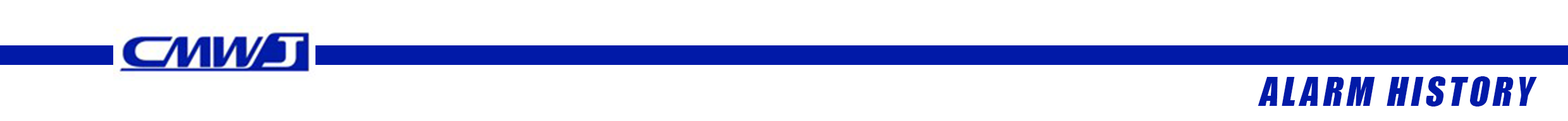
<style>
.page{position:relative;width:1568px;height:121px;background:#ffffff}
.page>*{position:absolute;margin:0}
.t1{font:36.9px "Impact";letter-spacing:0.1em;color:#011aa8;font-style:italic}
</style>
<div class="page">
<p class="t1" style="left:1258px;top:77px;width:279px;height:30px">ALARM HISTORY</p>
</div>
